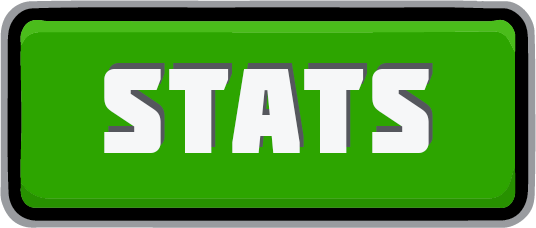
<style>
.page{position:relative;width:536px;height:228px;background:#2da500}
.page>*{position:absolute;margin:0}
.t1{font:120px "Molot";letter-spacing:0.05em;color:#f6f7f8}
</style>
<div class="page">
<p class="t1" style="left:108px;top:63px;width:325px;height:84px">stats</p>
<p class="t1" style="left:104px;top:69px;width:325px;height:84px">stats</p>
</div>
